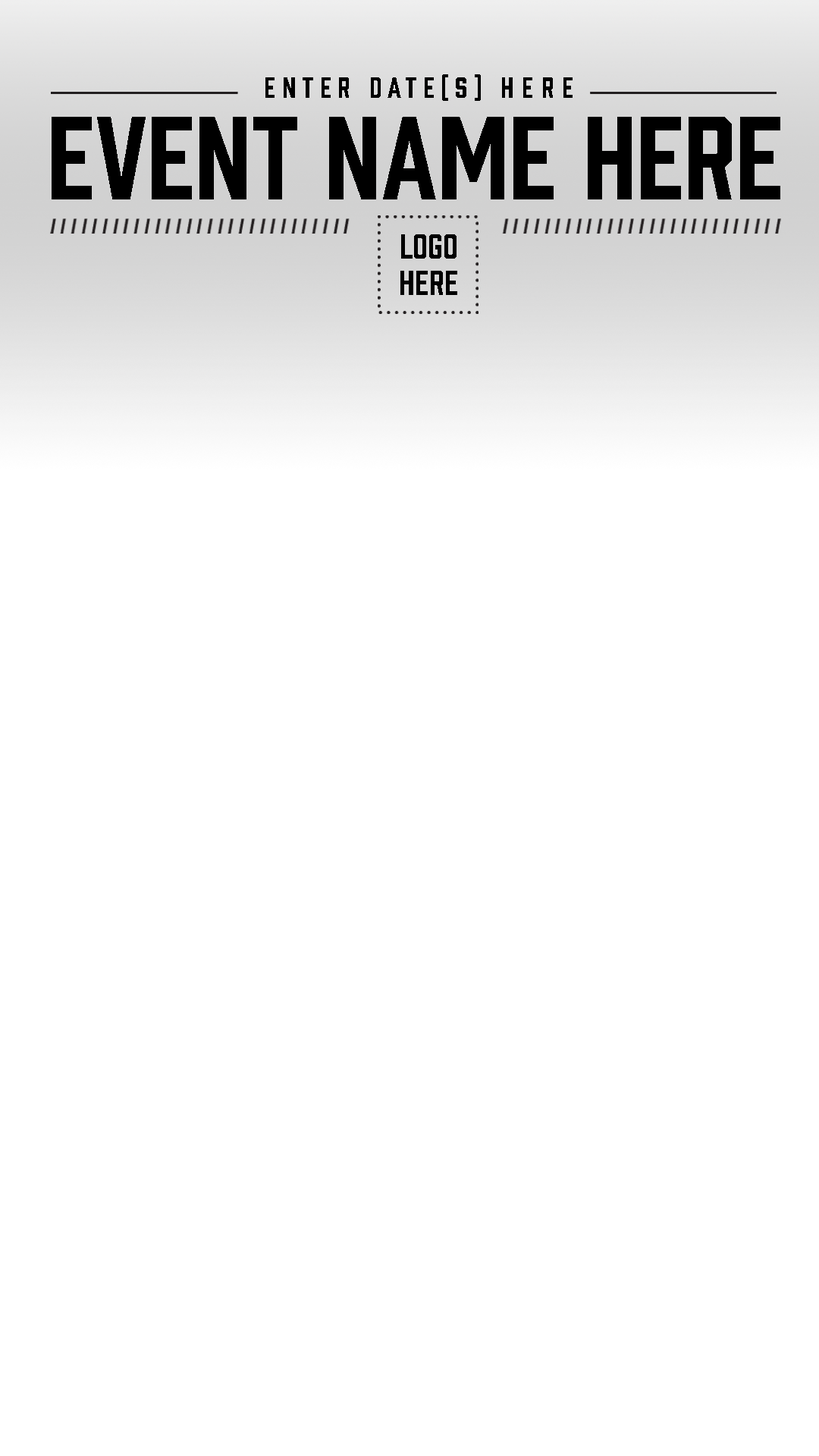
<style>
.page{position:relative;width:819px;height:1456px;background:#ffffff}
.page>*{position:absolute;margin:0}
.t1{font:26.8px "Prohibition-Regular";letter-spacing:0.23em;color:#000000}
.t2{font:26.8px "Prohibition-Regular";letter-spacing:0.3em;color:#000000}
.t3{font:108.9px "Prohibition-Regular";color:#000000}
.t4{font:32.1px/36.1px "Prohibition-Regular";color:#000000}
</style>
<div class="page">
<p class="t1" style="left:265px;top:74px;width:308px;height:27px">ENTER DATE(S) <span class="t2">HERE</span></p>
<p class="t3" style="left:52px;top:117px;width:728px;height:82px">EVENT NAME HERE</p>
<p class="t4" style="left:400px;top:234px;width:57px;height:61px;text-align:center">LOGO<br>HERE</p>
</div>
